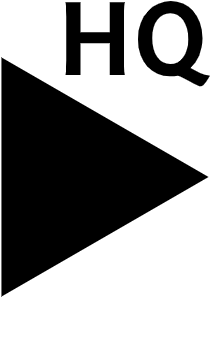
<style>
.page{position:relative;width:211px;height:349px;background:#ffffff}
.page>*{position:absolute;margin:0}
.t1{font:102px "AndikaNewBasic-Bold";color:#000000}
</style>
<div class="page">
<p class="t1" style="left:65px;top:1px;width:145px;height:86px">HQ</p>
</div>
